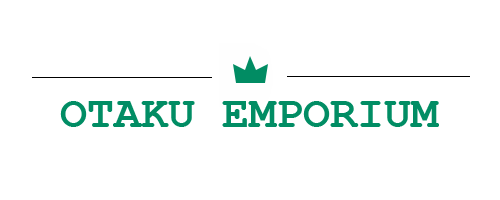
<style>
.page{position:relative;width:500px;height:200px;background:#ffffff}
.page>*{position:absolute;margin:0}
.t1{font:45px "CourierNewPS-BoldMT";color:#018d64}
</style>
<div class="page">
<p class="t1" style="left:60px;top:101px;width:379px;height:26px">OTAKU EMPORIUM</p>
</div>
